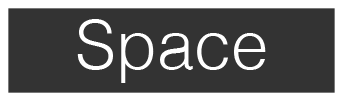
<style>
.page{position:relative;width:343px;height:101px;background:#333333}
.page>*{position:absolute;margin:0}
.t1{font:66.7px "Helvetica-Light";color:#ffffff}
</style>
<div class="page">
<p class="t1" style="left:77px;top:19px;width:189px;height:64px">Space</p>
</div>
